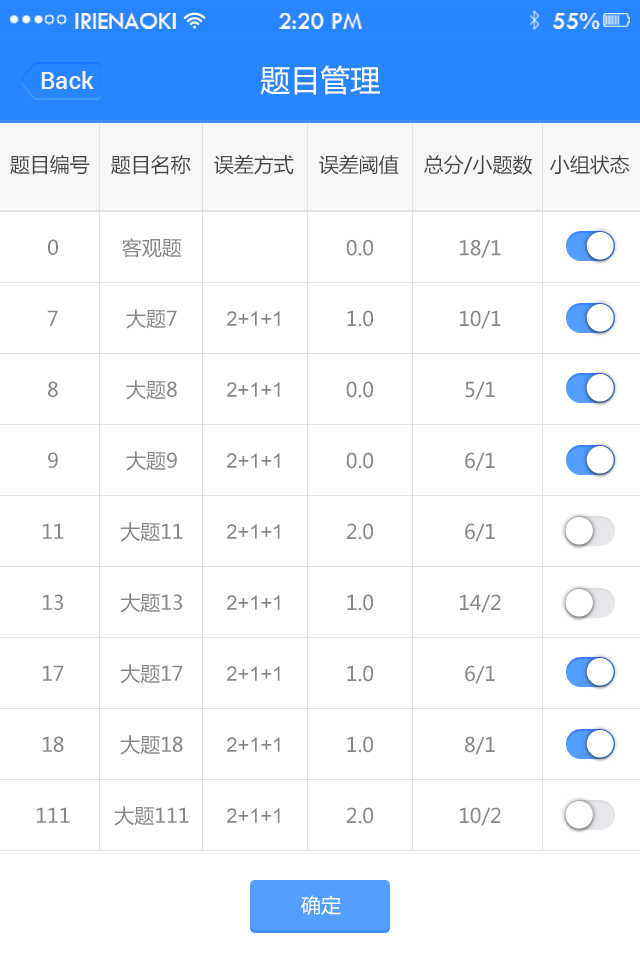
<style>
.page{position:relative;width:640px;height:960px;background:#ffffff}
.page>*{position:absolute;margin:0}
.t1{font:24px "TwCenMT-Regular";color:#ffffff}
.t2{font:30px "MicrosoftYaHei";color:#ffffff}
.t3{font:24px "Roboto-Medium";color:#f0f2f5}
.t4{font:20px "MicrosoftYaHei";color:#464646}
.t5{font:20px/71px "MicrosoftYaHei";color:#868686}
.t6{font:20px/71px "ArialMT";color:#868686}
.t7{font:20px "MicrosoftYaHei";color:#ffffff}
</style>
<div class="page">
<p class="t1" style="left:75px;top:13px;width:101px;height:16px">IRIENAOKI</p>
<p class="t1" style="left:279px;top:13px;width:83px;height:16px">2:20 PM</p>
<p class="t1" style="left:553px;top:13px;width:47px;height:16px">55%</p>
<p class="t2" style="left:260px;top:65px;width:120px;height:30px">题目管理</p>
<p class="t3" style="left:41px;top:71px;width:53px;height:18px">Back</p>
<p class="t4" style="left:10px;top:154px;width:80px;height:21px">题目编号</p>
<p class="t4" style="left:111px;top:155px;width:80px;height:20px">题目名称</p>
<p class="t4" style="left:214px;top:154px;width:80px;height:21px">误差方式</p>
<p class="t4" style="left:319px;top:154px;width:80px;height:21px">误差阈值</p>
<p class="t4" style="left:424px;top:155px;width:109px;height:20px">总分/小题数</p>
<p class="t4" style="left:550px;top:155px;width:80px;height:20px">小组状态</p>
<p class="t5" style="left:37px;top:239px;width:33px;height:584px;text-align:center">0<br>7<br>8<br>9<br>11<br>13<br>17<br>18<br>111</p>
<p class="t5" style="left:114px;top:238px;width:75px;height:588px;text-align:center">客观题<br>大题7<br>大题8<br>大题9<br>大题11<br>大题13<br>大题17<br>大题18<br>大题111</p>
<p class="t5" style="left:346px;top:239px;width:27px;height:585px;text-align:center">0.0<br>1.0<br>0.0<br>0.0<br>2.0<br>1.0<br>1.0<br>1.0<br>2.0</p>
<p class="t5" style="left:460px;top:239px;width:41px;height:587px;text-align:center">18/1<br>10/1<br>5/1<br>6/1<br>6/1<br>14/2<br>6/1<br>8/1<br>10/2</p>
<p class="t6" style="left:227px;top:311px;width:53px;height:512px;text-align:center"><span class="t5"> <br></span>2+1+1<br>2+1+1<br>2+1+1<br>2+1+1<br>2+1+1<br>2+1+1<br>2+1+1<br>2+1+1</p>
<p class="t7" style="left:301px;top:895px;width:40px;height:20px">确定</p>
</div>
